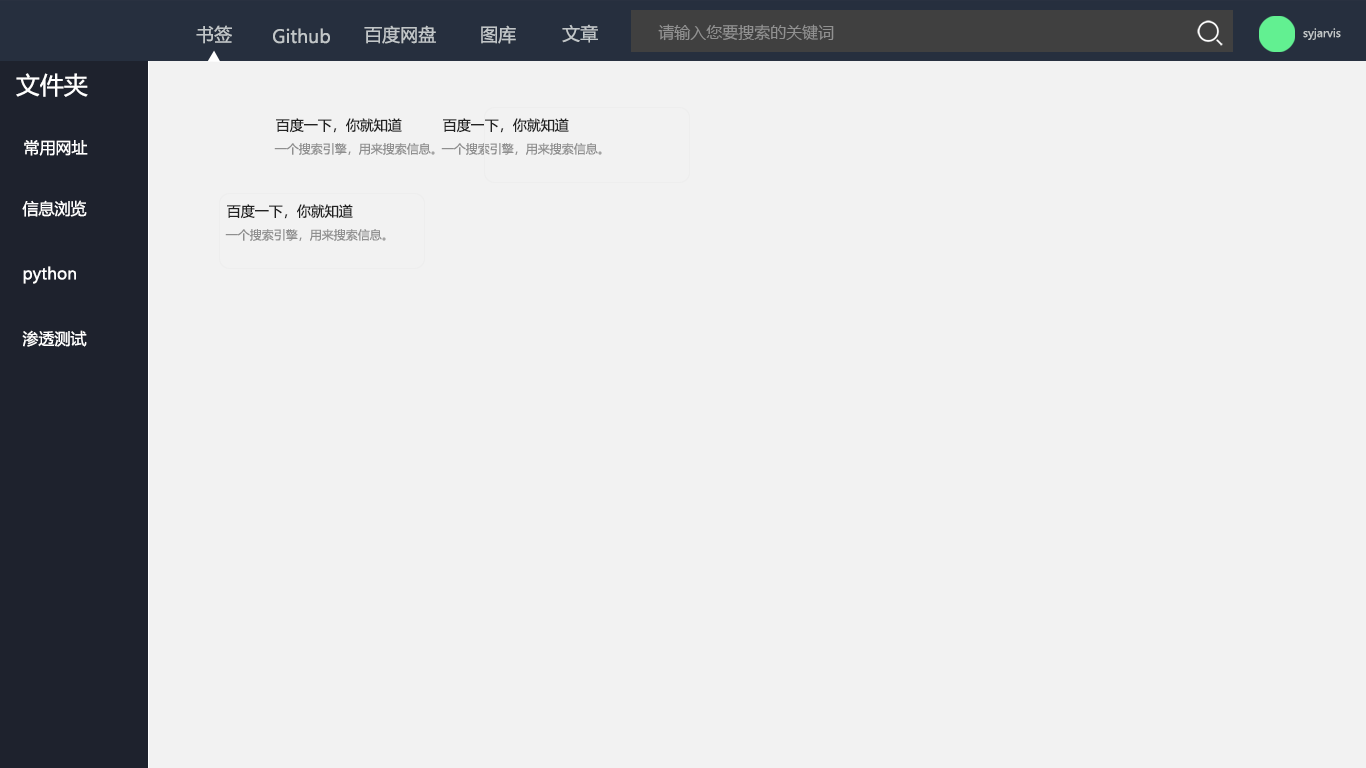
<style>
.page{position:relative;width:1366px;height:768px;background:#f2f2f2}
.page>*{position:absolute;margin:0}
.t1{font:18px "MicrosoftYaHei";color:#c1c6c8}
.t2{font:16px "MicrosoftYaHei";color:#919191}
.t3{font:11px "MicrosoftYaHei";color:#c1c6c8}
.t4{font:24px "MicrosoftYaHei";color:#ffffff}
.t5{font:14px "MicrosoftYaHei";color:#222222}
.t6{font:16px "MicrosoftYaHei";color:#ffffff}
.t7{font:12px "MicrosoftYaHei";color:#8f8f8f}
</style>
<div class="page">
<p class="t1" style="left:196px;top:25px;width:36px;height:19px">书签</p>
<p class="t1" style="left:273px;top:28px;width:57px;height:16px">Github</p>
<p class="t1" style="left:364px;top:25px;width:72px;height:19px">百度网盘</p>
<p class="t1" style="left:481px;top:25px;width:35px;height:19px">图库</p>
<p class="t1" style="left:562px;top:24px;width:36px;height:19px">文章</p>
<p class="t2" style="left:658px;top:24px;width:176px;height:17px">请输入您要搜索的关键词</p>
<p class="t3" style="left:1303px;top:28px;width:38px;height:12px">syjarvis</p>
<p class="t4" style="left:16px;top:73px;width:72px;height:24px">文件夹</p>
<p class="t5" style="left:276px;top:118px;width:126px;height:15px">百度一下，你就知道</p>
<p class="t5" style="left:443px;top:118px;width:126px;height:15px">百度一下，你就知道</p>
<p class="t6" style="left:24px;top:140px;width:64px;height:16px">常用网址</p>
<p class="t7" style="left:274px;top:143px;width:161px;height:12px">一个搜索引擎，用来搜索信息。</p>
<p class="t7" style="left:441px;top:143px;width:161px;height:12px">一个搜索引擎，用来搜索信息。</p>
<p class="t6" style="left:22px;top:200px;width:65px;height:17px">信息浏览</p>
<p class="t5" style="left:227px;top:204px;width:126px;height:15px">百度一下，你就知道</p>
<p class="t7" style="left:225px;top:229px;width:161px;height:12px">一个搜索引擎，用来搜索信息。</p>
<p class="t6" style="left:23px;top:266px;width:53px;height:18px">python</p>
<p class="t6" style="left:22px;top:330px;width:65px;height:17px">渗透测试</p>
</div>
